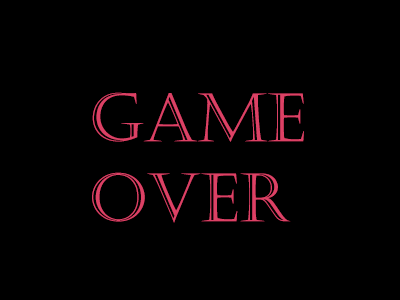
<style>
.page{position:relative;width:400px;height:300px;background:#000000}
.page>*{position:absolute;margin:0}
.t1{font:66.7px "Castellar";color:#dc4165}
</style>
<div class="page">
<p class="t1" style="left:92px;top:92px;width:212px;height:131px">GAME OVER</p>
</div>
